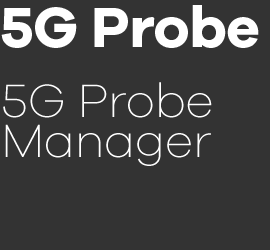
<style>
.page{position:relative;width:270px;height:250px;background:#333333}
.page>*{position:absolute;margin:0}
.t1{font:58.5px "GalanoGrotesque-Bold";letter-spacing:-0.01em;color:#ffffff}
.t2{font:48px/40px "GalanoGrotesque-ExtraLight";letter-spacing:-0.01em;color:#ffffff}
</style>
<div class="page">
<p class="t1" style="left:1px;top:5px;width:258px;height:43px">5G Probe</p>
<p class="t2" style="left:3px;top:82px;width:209px;height:84px">5G Probe <br>Manager</p>
</div>
